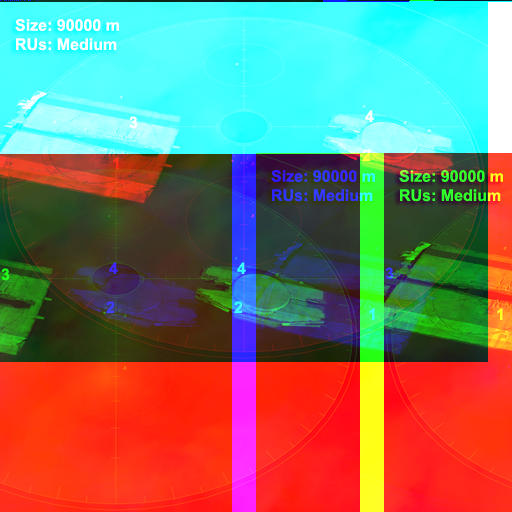
<style>
.page{position:relative;width:512px;height:512px}
.page>*{position:absolute;margin:0}
.t1{font:16px "Arial-BoldMT"}
.t2{font:16px "Arial-BoldMT";color:#ff371c}
</style>
<div class="page">
<p class="t1" style="left:15px;top:17px;width:104px;height:32px">Size: 90000 m<br>RUs: Medium</p>
<p class="t1" style="left:365px;top:108px;width:9px;height:12px">4</p>
<p class="t2" style="left:113px;top:155px;width:6px;height:12px">1</p>
</div>
